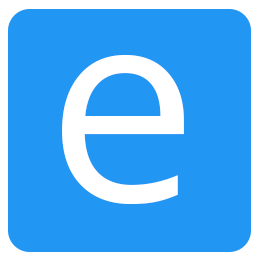
<style>
.page{position:relative;width:260px;height:260px;background:#2196f3}
.page>*{position:absolute;margin:0}
.t1{font:267.7px "OpenSans";color:#ffffff}
</style>
<div class="page">
<p class="t1" style="left:62px;top:55px;width:122px;height:149px">e</p>
</div>
